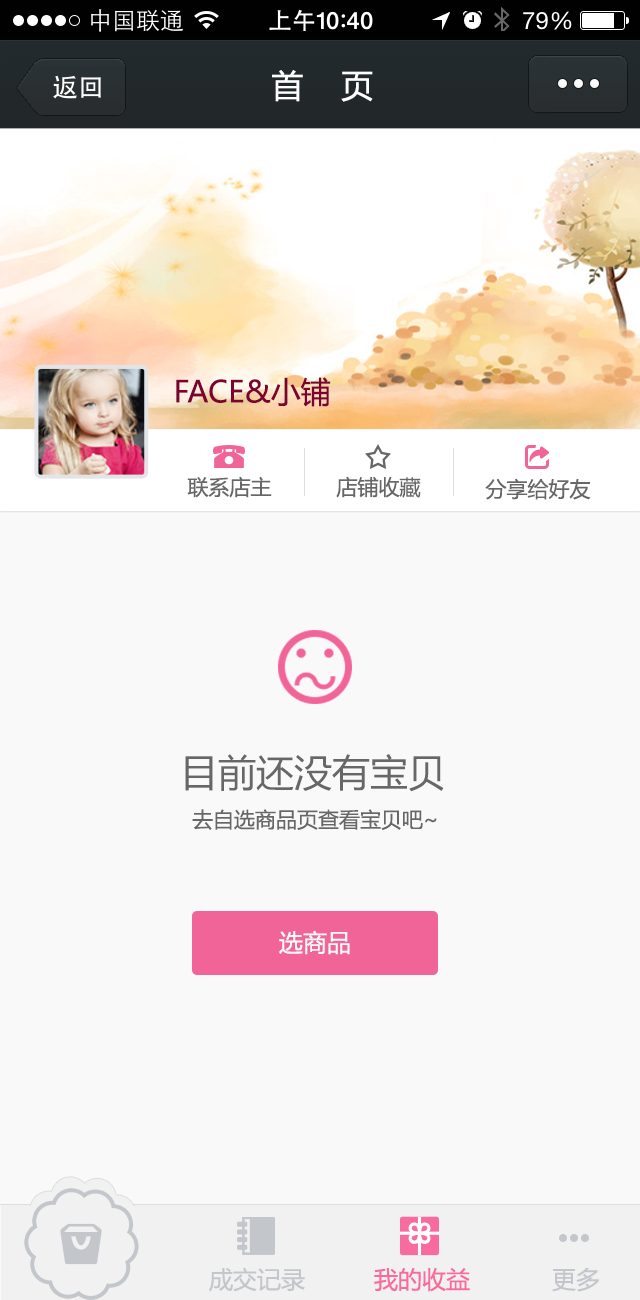
<style>
.page{position:relative;width:640px;height:1300px;background:#faf9f9}
.page>*{position:absolute;margin:0}
.t1{font:32px "MicrosoftYaHei";color:#ffffff}
.t2{font:30px "MicrosoftYaHei";color:#7d022f}
.t3{font:21px "MicrosoftYaHei";color:#676767}
.t4{font:38px "MicrosoftYaHei";color:#676767}
.t5{font:24px "MicrosoftYaHei";color:#faf9f9}
.t6{font:24px "MicrosoftYaHei";color:#c3c6cb}
.t7{font:24px "MicrosoftYaHei";color:#f86b9f}
</style>
<div class="page">
<p class="t1" style="left:272px;top:70px;width:101px;height:32px">首    页</p>
<p class="t2" style="left:176px;top:377px;width:155px;height:30px">FACE&amp;小铺</p>
<p class="t3" style="left:187px;top:476px;width:85px;height:22px">联系店主</p>
<p class="t3" style="left:336px;top:476px;width:85px;height:22px">店铺收藏</p>
<p class="t3" style="left:485px;top:478px;width:106px;height:22px">分享给好友</p>
<p class="t4" style="left:185px;top:754px;width:259px;height:38px">目前还没有宝贝</p>
<p class="t3" style="left:192px;top:809px;width:245px;height:21px">去自选商品页查看宝贝吧~</p>
<p class="t5" style="left:279px;top:930px;width:71px;height:25px">选商品</p>
<p class="t6" style="left:209px;top:1267px;width:96px;height:25px">成交记录</p>
<p class="t7" style="left:374px;top:1267px;width:96px;height:25px">我的收益</p>
<p class="t6" style="left:552px;top:1268px;width:47px;height:24px">更多</p>
</div>
